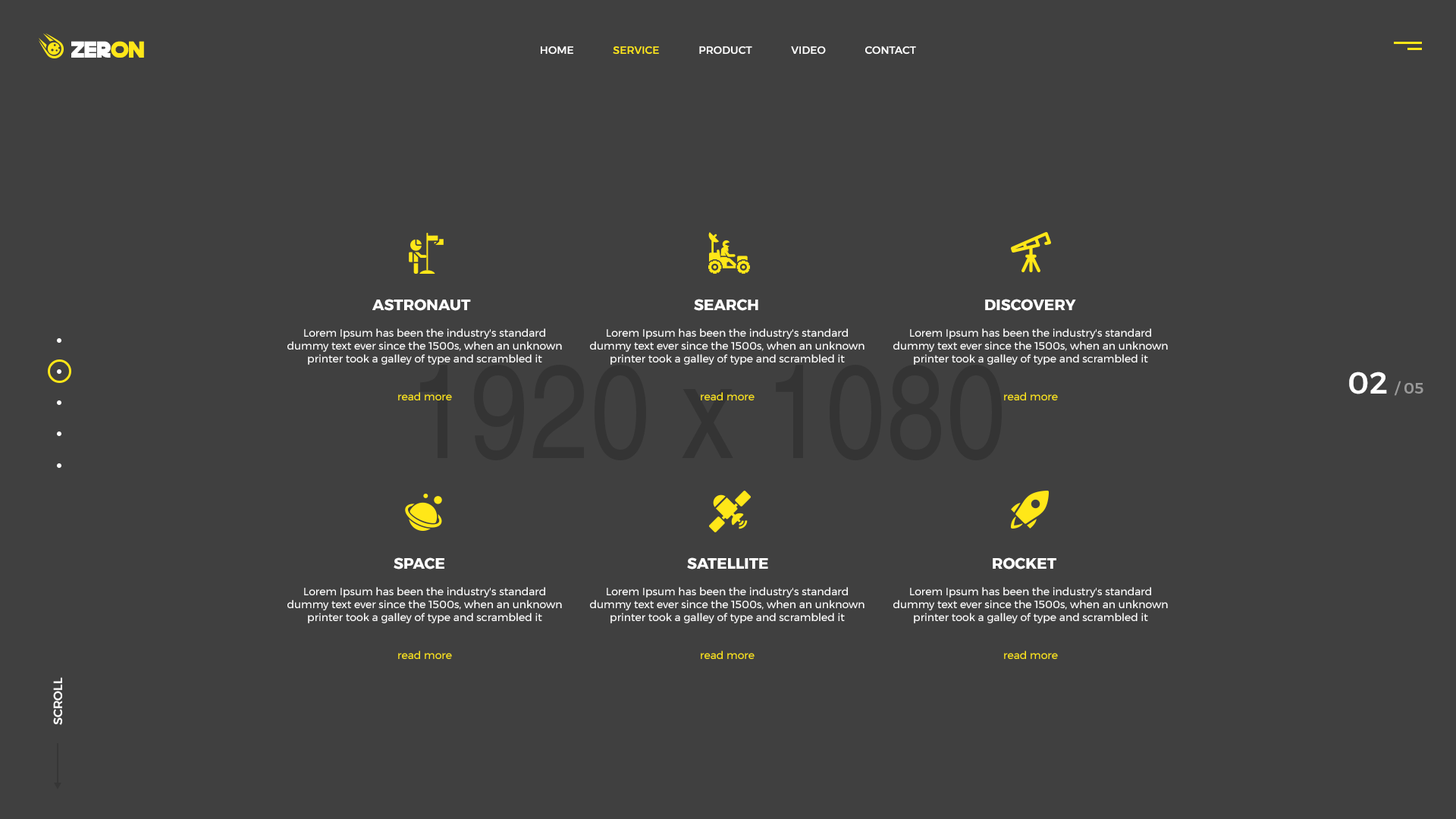
<style>
.page{position:relative;width:1456px;height:819px;background:#404040}
.page>*{position:absolute;margin:0}
.t1{font:22.7px "DeathStar";letter-spacing:0.001em;color:#ffffff}
.t2{font:22.7px "DeathStar";letter-spacing:0.001em;color:#ffe718}
.t3{font:10.6px "Montserrat-Medium";letter-spacing:0.001em;color:#ffffff}
.t4{font:10.6px "Montserrat-Medium";letter-spacing:0.001em;color:#ffe718}
.t5{font:15.2px "Montserrat-Bold";letter-spacing:0.001em;color:#ffffff}
.t6{font:10.6px "Montserrat-Regular";letter-spacing:0.001em;color:#ffffff}
.t7{font:10.6px "Montserrat-Regular";letter-spacing:0.001em;color:#ffe718}
.t8{font:15.2px "Montserrat-Medium";letter-spacing:0.001em;color:#9a9a9a}
.t9{font:30.3px "Montserrat-Medium";letter-spacing:0.001em;color:#ffffff}
.t10{font:12.1px "Montserrat-Medium";letter-spacing:0.001em;color:#ffffff}
</style>
<div class="page">
<p class="t1" style="left:71px;top:41px;width:73px;height:17px">zer<span class="t2">on</span></p>
<p class="t3" style="left:541px;top:46px;width:375px;height:9px">HOME               <span class="t4">SERVICE</span>               PRODUCT               VIDEO               CONTACT</p>
<p class="t5" style="left:372px;top:299px;width:99px;height:12px">ASTRONAUT</p>
<p class="t5" style="left:694px;top:299px;width:64px;height:12px">SEARCH</p>
<p class="t5" style="left:985px;top:299px;width:91px;height:12px">DISCOVERY</p>
<p class="t6" style="left:287px;top:328px;width:275px;height:72px;text-align:center">Lorem Ipsum has been the industry's standard dummy text ever since the 1500s, when an unknown printer took a galley of type and scrambled it<br><br><br><span class="t7">read more</span></p>
<p class="t6" style="left:590px;top:328px;width:274px;height:72px;text-align:center">Lorem Ipsum has been the industry's standard dummy text ever since the 1500s, when an unknown printer took a galley of type and scrambled it<br><br><br><span class="t7">read more</span></p>
<p class="t6" style="left:893px;top:328px;width:275px;height:72px;text-align:center">Lorem Ipsum has been the industry's standard dummy text ever since the 1500s, when an unknown printer took a galley of type and scrambled it<br><br><br><span class="t7">read more</span></p>
<p class="t8" style="left:1349px;top:372px;width:74px;height:24px"><span class="t9">02 </span>/ 05</p>
<p class="t5" style="left:394px;top:557px;width:50px;height:13px">SPACE</p>
<p class="t5" style="left:687px;top:557px;width:81px;height:13px">SATELLITE</p>
<p class="t5" style="left:993px;top:557px;width:63px;height:13px">ROCKET</p>
<p class="t6" style="left:287px;top:587px;width:275px;height:72px;text-align:center">Lorem Ipsum has been the industry's standard dummy text ever since the 1500s, when an unknown printer took a galley of type and scrambled it<br><br><br><span class="t7">read more</span></p>
<p class="t6" style="left:590px;top:587px;width:274px;height:72px;text-align:center">Lorem Ipsum has been the industry's standard dummy text ever since the 1500s, when an unknown printer took a galley of type and scrambled it<br><br><br><span class="t7">read more</span></p>
<p class="t6" style="left:893px;top:587px;width:275px;height:72px;text-align:center">Lorem Ipsum has been the industry's standard dummy text ever since the 1500s, when an unknown printer took a galley of type and scrambled it<br><br><br><span class="t7">read more</span></p>
<p class="t10" style="left:53px;top:677px;width:10px;height:48px;rotate:-90deg">SCROLL</p>
</div>
